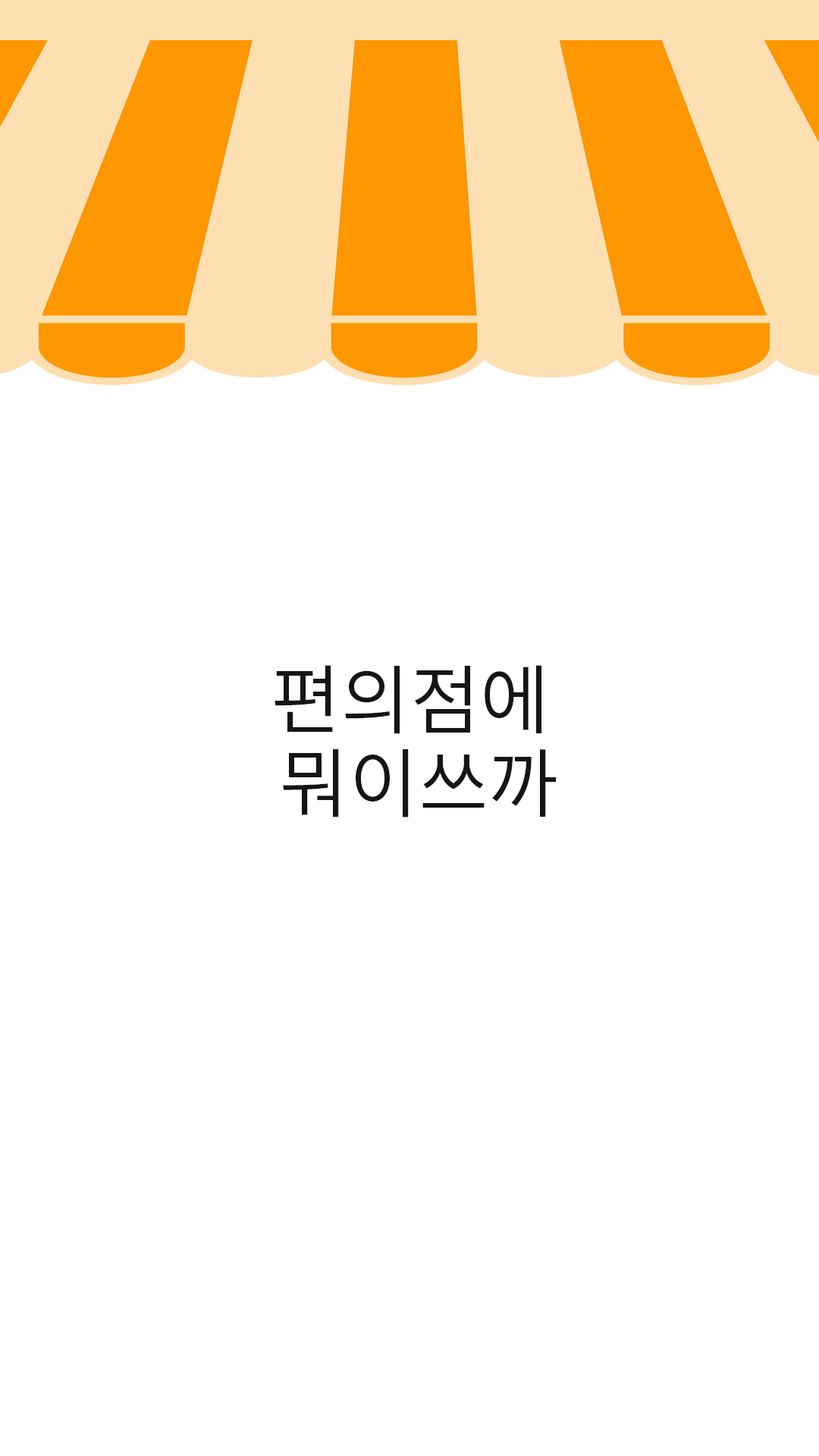
<style>
.page{position:relative;width:819px;height:1456px;background:#ffffff}
.page>*{position:absolute;margin:0}
.t1{font:75.8px/45.5px "NotoSansCJKkr-DemiLight";color:#151515}
</style>
<div class="page">
<p class="t1" style="left:275px;top:665px;width:281px;height:152px;text-align:center">편의점에 <br>뭐이쓰까</p>
</div>
